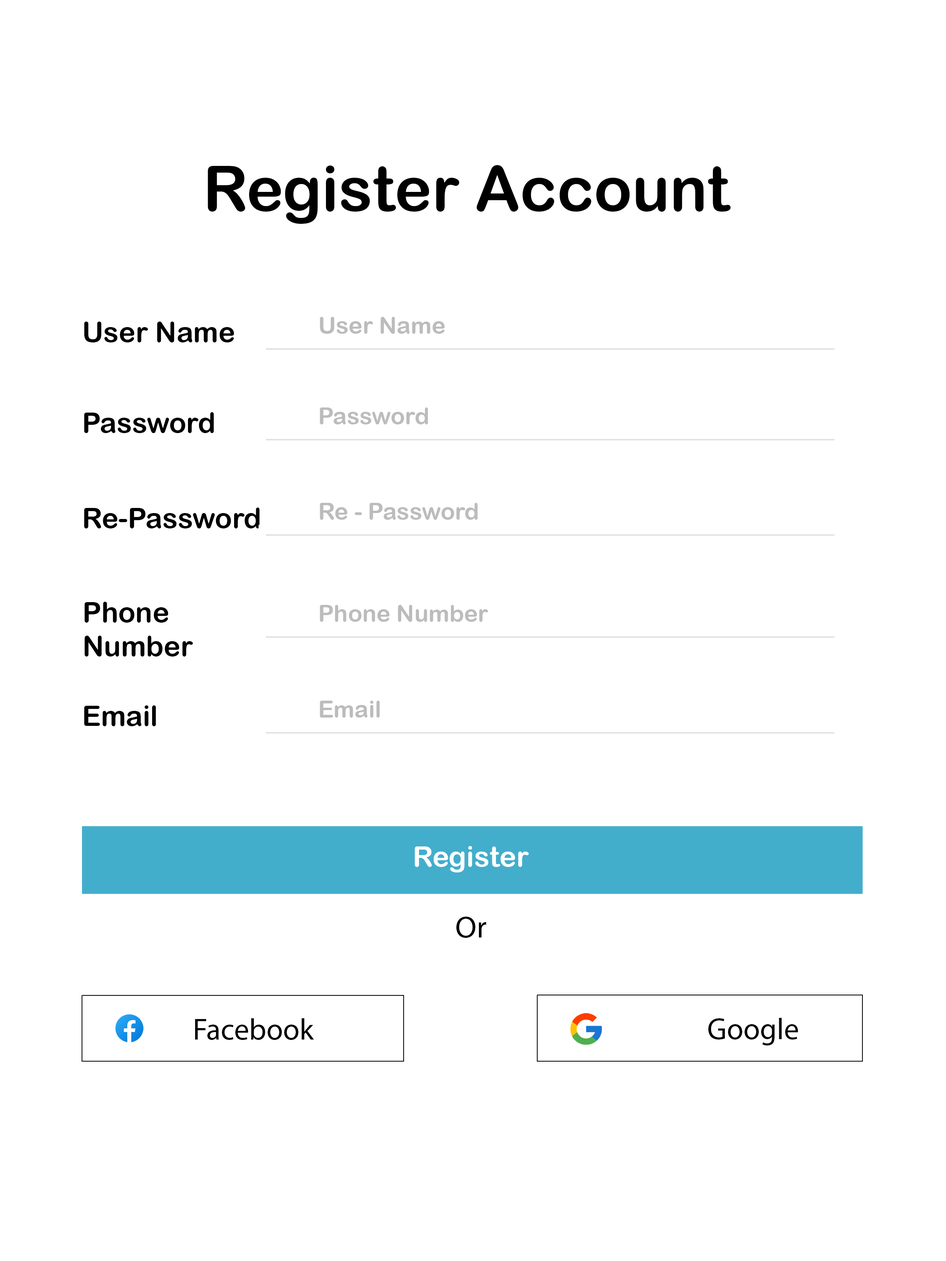
<style>
.page{position:relative;width:946px;height:1261px;background:#ffffff}
.page>*{position:absolute;margin:0}
.t1{font:62.5px "ArialRoundedMTBold";color:#000000}
.t2{font:23.6px "ArialRoundedMTBold";color:#bcbcbc}
.t3{font:28.3px "ArialRoundedMTBold";color:#000000}
.t4{font:28.3px/33.9px "ArialRoundedMTBold";color:#000000}
.t5{font:28.3px "ArialRoundedMTBold";color:#ffffff}
.t6{font:30.6px "MyriadPro-Regular";color:#000000}
.t7{font:30.2px "MyriadPro-Regular";color:#000000}
</style>
<div class="page">
<p class="t1" style="left:208px;top:165px;width:523px;height:59px">Register Account</p>
<p class="t2" style="left:320px;top:317px;width:124px;height:17px">User Name</p>
<p class="t3" style="left:84px;top:322px;width:150px;height:20px">User Name</p>
<p class="t3" style="left:84px;top:412px;width:130px;height:21px">Password</p>
<p class="t2" style="left:320px;top:407px;width:108px;height:17px">Password</p>
<p class="t3" style="left:84px;top:508px;width:176px;height:20px">Re-Password</p>
<p class="t2" style="left:320px;top:503px;width:158px;height:17px">Re - Password</p>
<p class="t4" style="left:84px;top:602px;width:109px;height:54px">Phone<br>Number</p>
<p class="t2" style="left:320px;top:605px;width:168px;height:17px">Phone Number</p>
<p class="t2" style="left:320px;top:701px;width:60px;height:17px">Email</p>
<p class="t3" style="left:84px;top:705px;width:72px;height:21px">Email</p>
<p class="t5" style="left:415px;top:846px;width:114px;height:26px">Register</p>
<p class="t6" style="left:456px;top:917px;width:30px;height:21px">Or</p>
<p class="t7" style="left:195px;top:1018px;width:119px;height:22px">Facebook</p>
<p class="t7" style="left:708px;top:1018px;width:90px;height:27px">Google</p>
</div>
